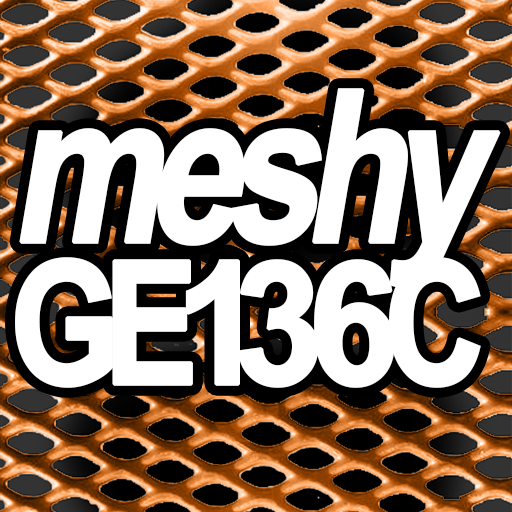
<style>
.page{position:relative;width:512px;height:512px;background:#ffffff}
.page>*{position:absolute;margin:0}
.t1{font:213.2px/142px "ArialNarrow-Bold";letter-spacing:-0.1em;color:#ffffff;font-weight:bold;font-style:italic;scale:0.96 1}
.t2{font:172.4px/142px "ArialNarrow-Bold";letter-spacing:-0.12em;color:#ffffff;font-weight:bold}
.t3{font:172.4px/142px "ArialNarrow-Bold";letter-spacing:-0.16em;color:#ffffff;font-weight:bold}
.t4{font:172.4px/142px "ArialNarrow-Bold";letter-spacing:-0.18em;color:#ffffff;font-weight:bold;scale:1.14 1}
.t5{font:172.4px/142px "ArialNarrow-Bold";letter-spacing:-0.1em;color:#ffffff;font-weight:bold;scale:1.14 1}
.t6{font:172.4px/142px "ArialNarrow-Bold";letter-spacing:-0.1em;color:#ffffff;font-weight:bold}
</style>
<div class="page">
<p class="t1" style="left:15px;top:88px;width:486px;height:300px;text-align:center">meshy<br><span class="t2">G</span><span class="t3">E</span><span class="t4">1</span><span class="t5">36</span><span class="t6">C</span></p>
</div>
